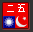
<style>
.page{position:relative;width:33px;height:32px;background:#f20000}
.page>*{position:absolute;margin:0}
.t1{font:10.4px "SimSun";color:#ffffff}
</style>
<div class="page">
<p class="t1" style="left:7px;top:4px;width:18px;height:8px">二五</p>
</div>
